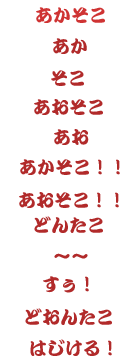
<style>
.page{position:relative;width:136px;height:360px;background:#ffffff}
.page>*{position:absolute;margin:0}
.t1{font:18px "OedKtrStd-E";color:#cf3333}
.t2{font:18px "OedKtrStd-E";color:#b12a2a}
</style>
<div class="page">
<p class="t1" style="left:36px;top:7px;width:69px;height:16px">あかそこ</p>
<p class="t2" style="left:53px;top:38px;width:34px;height:16px">あか</p>
<p class="t2" style="left:51px;top:70px;width:33px;height:16px">そこ</p>
<p class="t2" style="left:34px;top:99px;width:69px;height:16px">あおそこ</p>
<p class="t2" style="left:54px;top:129px;width:35px;height:16px">あお</p>
<p class="t2" style="left:20px;top:159px;width:100px;height:16px">あかそこ！！</p>
<p class="t2" style="left:19px;top:192px;width:100px;height:16px">あおそこ！！</p>
<p class="t2" style="left:34px;top:216px;width:69px;height:17px">どんたこ</p>
<p class="t2" style="left:54px;top:253px;width:34px;height:6px">～～</p>
<p class="t2" style="left:43px;top:276px;width:46px;height:17px">すぅ！</p>
<p class="t2" style="left:25px;top:308px;width:87px;height:17px">どおんたこ</p>
<p class="t2" style="left:30px;top:339px;width:82px;height:17px">はじける！</p>
</div>
